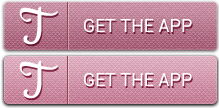
<style>
.page{position:relative;width:219px;height:108px}
.page>*{position:absolute;margin:0}
.t1{font:60px "Cookie-Regular";color:#ffffff}
.t2{font:18px "Roboto-Regular";color:#ffffff;text-transform:uppercase}
</style>
<div class="page">
<p class="t1" style="left:19px;top:6px;width:39px;height:39px">T</p>
<p class="t2" style="left:84px;top:19px;width:108px;height:13px">Get the app</p>
<p class="t1" style="left:19px;top:60px;width:39px;height:39px">T</p>
<p class="t2" style="left:84px;top:73px;width:108px;height:13px">Get the app</p>
</div>
